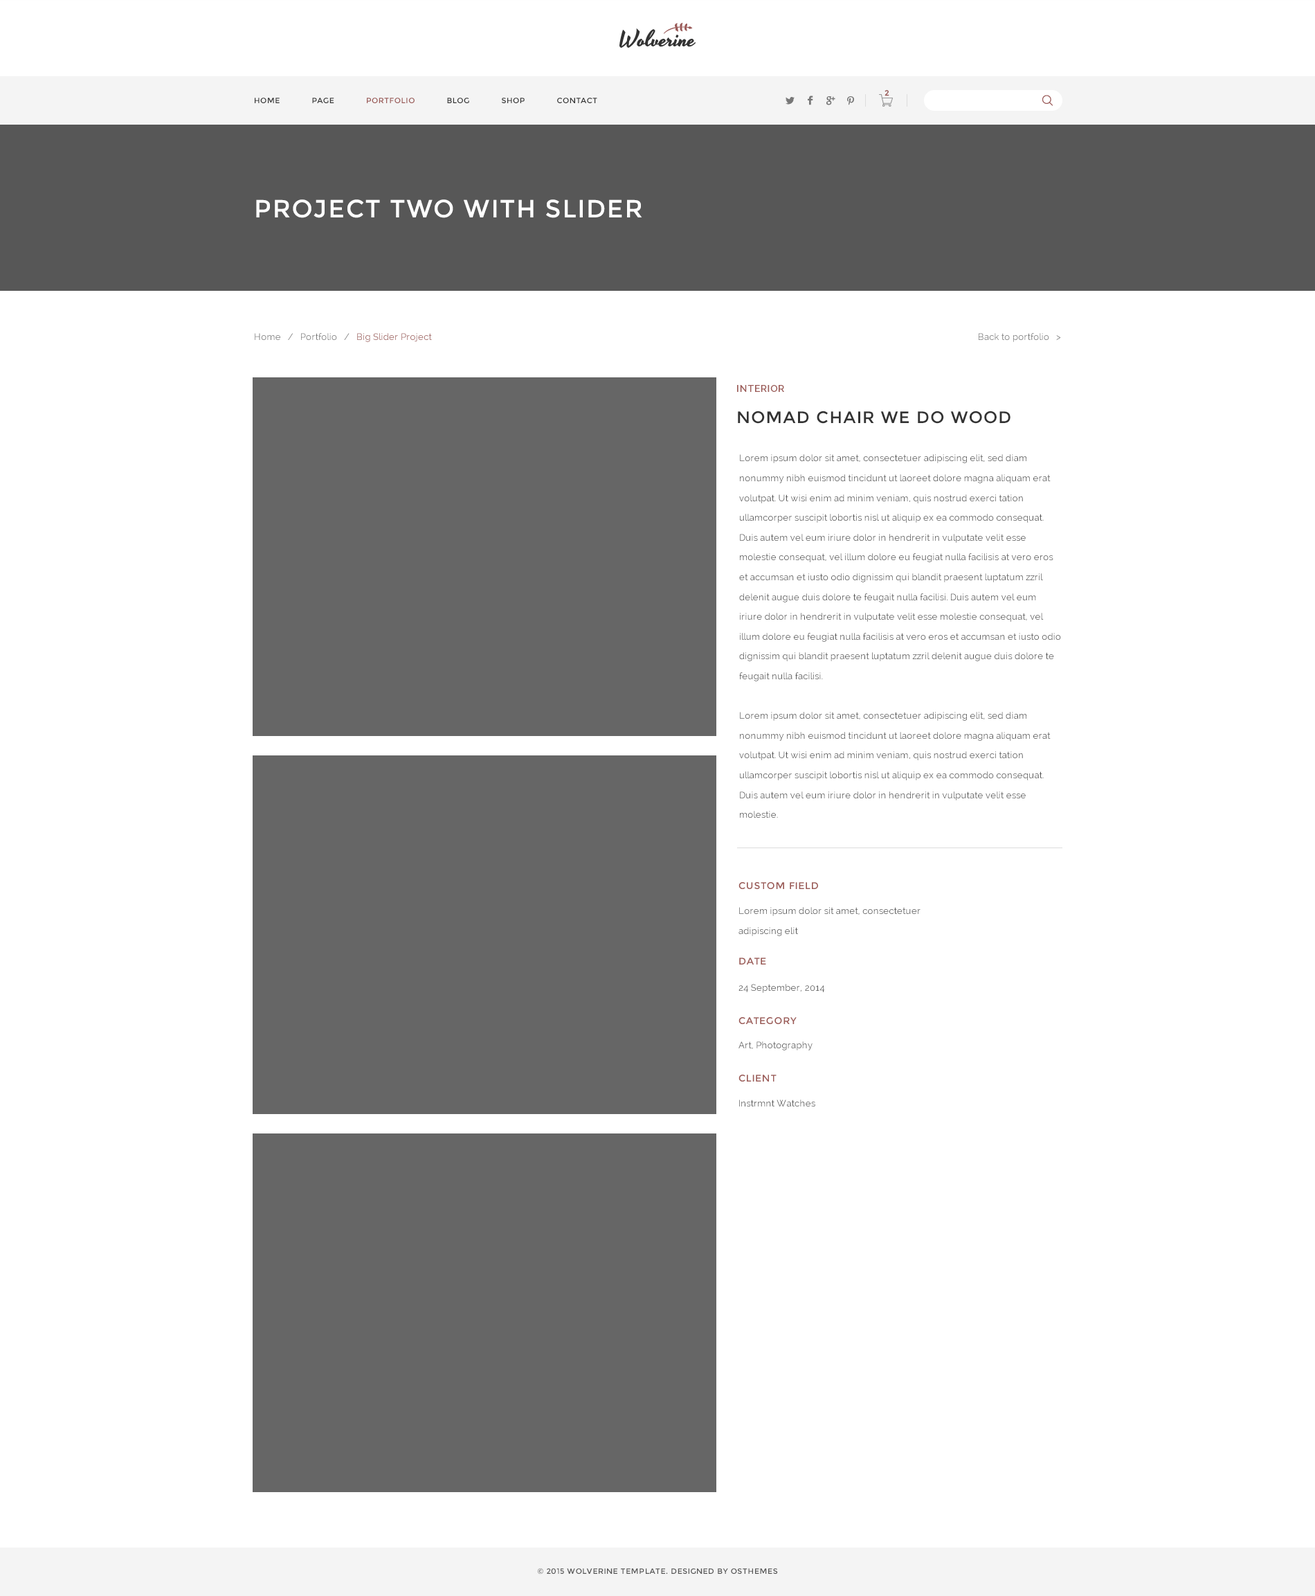
<style>
.page{position:relative;width:1315px;height:1596px;background:#ffffff}
.page>*{position:absolute;margin:0}
.t1{font:7.6px "Montserrat-Regular";letter-spacing:0.05em;color:#333333}
.t2{font:7.6px "Montserrat-Regular";letter-spacing:0.05em;color:#9b5a57}
.t3{font:7.6px "Montserrat-Regular";color:#9a5a58;font-weight:bold}
.t4{font:24.9px "Montserrat-Regular";letter-spacing:0.05em;color:#ffffff}
.t5{font:9px "Raleway";letter-spacing:0.02em;color:#777777}
.t6{font:9px "Raleway";letter-spacing:0.02em;color:#9b5a57}
.t7{font:9.7px "Raleway-SemiBold";letter-spacing:0.05em;color:#9c5b57}
.t8{font:16.6px "Montserrat-Regular";letter-spacing:0.05em;color:#333333}
.t9{font:9px/19.8px "Raleway";letter-spacing:0.02em;color:#535353}
.t10{font:9.7px "Montserrat-Regular";letter-spacing:0.05em;color:#9c5b57}
.t11{font:9px "Raleway";letter-spacing:0.02em;color:#535353}
.t12{font:9px "Raleway";letter-spacing:0.02em;color:#555555}
.t13{font:7.6px "Montserrat-Regular";letter-spacing:0.05em;color:#545454}
</style>
<div class="page">
<p class="t1" style="left:255px;top:98px;width:342px;height:5px">HOME      PAGE      <span class="t2">PORTFOLIO</span>      BLOG      SHOP      CONTACT</p>
<p class="t3" style="left:885px;top:90px;width:5px;height:6px">2</p>
<p class="t4" style="left:256px;top:199px;width:386px;height:19px">PROJECT TWO WITH SLIDER</p>
<p class="t5" style="left:255px;top:333px;width:177px;height:9px">Home   /   Portfolio   /   <span class="t6">Big Slider Project</span></p>
<p class="t5" style="left:979px;top:333px;width:82px;height:9px">Back to portfolio   &gt;</p>
<p class="t7" style="left:737px;top:385px;width:47px;height:7px">INTERIOR</p>
<p class="t8" style="left:738px;top:411px;width:273px;height:13px">NOMAD CHAIR WE DO WOOD</p>
<p class="t9" style="left:739px;top:454px;width:322px;height:364px">Lorem ipsum dolor sit amet, consectetuer adipiscing elit, sed diam nonummy nibh euismod tincidunt ut laoreet dolore magna aliquam erat volutpat. Ut wisi enim ad minim veniam, quis nostrud exerci tation ullamcorper suscipit lobortis nisl ut aliquip ex ea commodo consequat. Duis autem vel eum iriure dolor in hendrerit in vulputate velit esse molestie consequat, vel illum dolore eu feugiat nulla facilisis at vero eros et accumsan et iusto odio dignissim qui blandit praesent luptatum zzril delenit augue duis dolore te feugait nulla facilisi. Duis autem vel eum iriure dolor in hendrerit in vulputate velit esse molestie consequat, vel illum dolore eu feugiat nulla facilisis at vero eros et accumsan et iusto odio dignissim qui blandit praesent luptatum zzril delenit augue duis dolore te feugait nulla facilisi.<br><br>Lorem ipsum dolor sit amet, consectetuer adipiscing elit, sed diam nonummy nibh euismod tincidunt ut laoreet dolore magna aliquam erat volutpat. Ut wisi enim ad minim veniam, quis nostrud exerci tation ullamcorper suscipit lobortis nisl ut aliquip ex ea commodo consequat. Duis autem vel eum iriure dolor in hendrerit in vulputate velit esse molestie.</p>
<p class="t10" style="left:739px;top:882px;width:79px;height:7px">CUSTOM FIELD</p>
<p class="t9" style="left:739px;top:907px;width:182px;height:29px">Lorem ipsum dolor sit amet, consectetuer adipiscing elit</p>
<p class="t10" style="left:739px;top:957px;width:27px;height:7px">DATE</p>
<p class="t11" style="left:739px;top:984px;width:86px;height:9px">24 September, 2014</p>
<p class="t10" style="left:739px;top:1017px;width:58px;height:7px">CATEGORY</p>
<p class="t11" style="left:739px;top:1041px;width:74px;height:9px">Art, Photography</p>
<p class="t10" style="left:739px;top:1074px;width:38px;height:7px">CLIENT</p>
<p class="t12" style="left:739px;top:1099px;width:77px;height:8px">Instrmnt Watches</p>
<p class="t13" style="left:537px;top:1568px;width:241px;height:6px">© 2015 WOLVERINE TEMPLATE. DESIGNED BY OSTHEMES</p>
</div>
